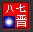
<style>
.page{position:relative;width:33px;height:32px;background:#f20000}
.page>*{position:absolute;margin:0}
.t1{font:10.4px "SimSun";color:#ffffff}
.t2{font:11.7px "SimSun";color:#ffffff}
</style>
<div class="page">
<p class="t1" style="left:6px;top:4px;width:20px;height:9px">八七</p>
<p class="t2" style="left:16px;top:15px;width:11px;height:12px">晋</p>
</div>
